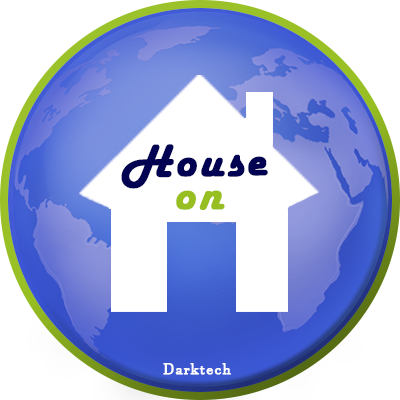
<style>
.page{position:relative;width:400px;height:400px;background:#ffffff}
.page>*{position:absolute;margin:0}
.t1{font:48px "HarlowSolid";letter-spacing:0.05em;color:#020253;font-weight:bold}
.t2{font:48px "HarlowSolid";letter-spacing:0.05em;color:#98bf22;font-weight:bold}
.t3{font:15px "JavaneseText";letter-spacing:0.05em;color:#feffff;font-weight:bold}
</style>
<div class="page">
<p class="t1" style="left:121px;top:144px;width:147px;height:45px;rotate:-1deg">House</p>
<p class="t2" style="left:176px;top:190px;width:49px;height:20px;rotate:-1deg">on</p>
<p class="t3" style="left:163px;top:363px;width:68px;height:12px">Darktech</p>
</div>
